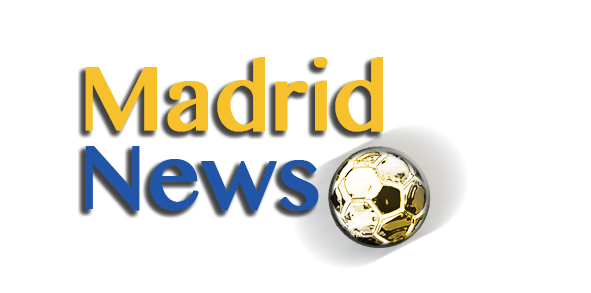
<style>
.page{position:relative;width:591px;height:293px;background:#ffffff}
.page>*{position:absolute;margin:0}
.t1{font:90.6px "BanglaMN";letter-spacing:-0.005em;color:#f7c12b;font-weight:bold}
.t2{font:90.6px "BanglaMN";letter-spacing:-0.005em;color:#2155a8;font-weight:bold}
</style>
<div class="page">
<p class="t1" style="left:85px;top:57px;width:298px;height:75px">Madrid</p>
<p class="t2" style="left:85px;top:146px;width:234px;height:65px">News</p>
</div>
